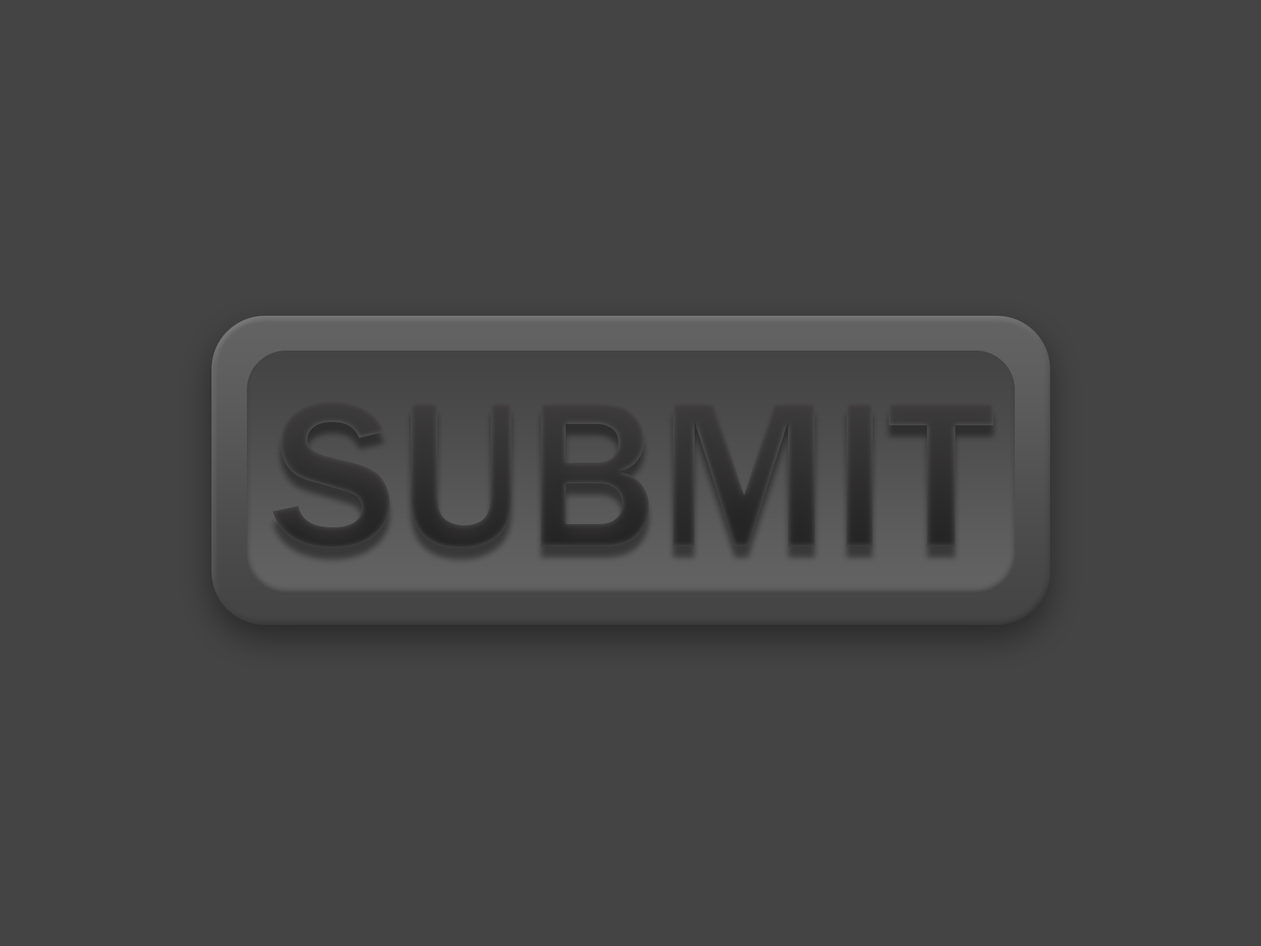
<style>
.page{position:relative;width:1261px;height:946px;background:#444444}
.page>*{position:absolute;margin:0}
.t1{font:214.2px "FranklinGothic-Medium";color:#353434}
</style>
<div class="page">
<p class="t1" style="left:273px;top:401px;width:721px;height:147px">SUBMIT</p>
</div>
